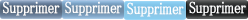
<style>
.page{position:relative;width:248px;height:20px}
.page>*{position:absolute;margin:0}
.t1{font:16.1px "MS-PMincho";letter-spacing:-0.025em;color:#ffffff;font-weight:bold;scale:0.84 1}
</style>
<div class="page">
<p class="t1" style="left:3px;top:1px;width:57px;height:15px">Supprimer</p>
<p class="t1" style="left:65px;top:1px;width:57px;height:15px">Supprimer</p>
<p class="t1" style="left:127px;top:2px;width:57px;height:15px">Supprimer</p>
<p class="t1" style="left:189px;top:1px;width:57px;height:15px">Supprimer</p>
</div>
